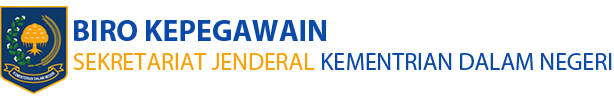
<style>
.page{position:relative;width:614px;height:99px;background:#ffffff}
.page>*{position:absolute;margin:0}
.t1{font:30px "MyriadPro-Bold";color:#0b49a7}
.t2{font:24px "MyriadPro-Regular";color:#f8a103}
.t3{font:24px "MyriadPro-Regular";color:#0b49a7}
</style>
<div class="page">
<p class="t1" style="left:74px;top:20px;width:252px;height:21px">BIRO KEPEGAWAIN</p>
<p class="t2" style="left:73px;top:53px;width:242px;height:17px">SEKRETARIAT JENDERAL</p>
<p class="t3" style="left:322px;top:53px;width:290px;height:17px">KEMENTRIAN DALAM NEGERI</p>
</div>
